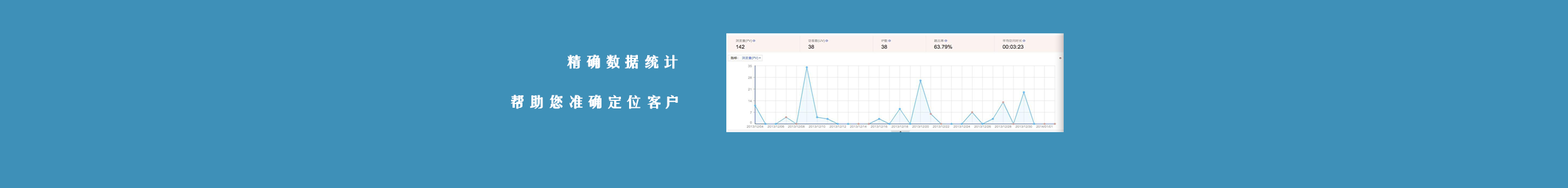
<style>
.page{position:relative;width:1568px;height:188px;background:#3e90b8}
.page>*{position:absolute;margin:0}
.t1{font:13.6px "FZYTK--GBK1-0";color:#ffffff;font-weight:bold;scale:1.39 1}
</style>
<div class="page">
<p class="t1" style="left:567px;top:55px;width:111px;height:14px">精确数据统计</p>
<p class="t1" style="left:511px;top:95px;width:167px;height:14px">帮助您准确定位客户</p>
</div>
